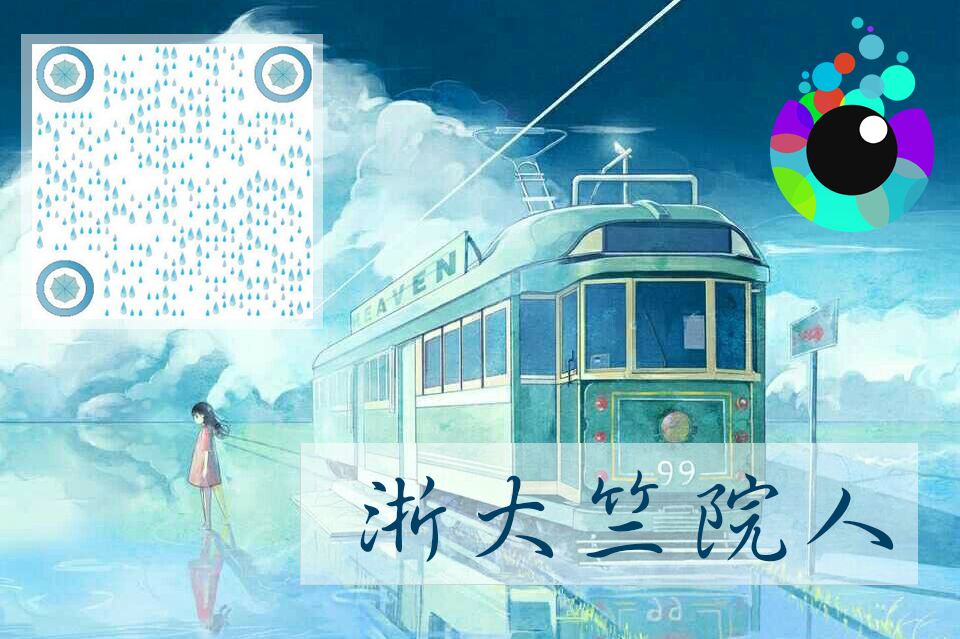
<style>
.page{position:relative;width:960px;height:639px}
.page>*{position:absolute;margin:0}
.t1{font:110.2px "HanWangShinSuMedium";color:#004064}
</style>
<div class="page">
<p class="t1" style="left:360px;top:470px;width:534px;height:92px">浙大竺院人</p>
</div>
